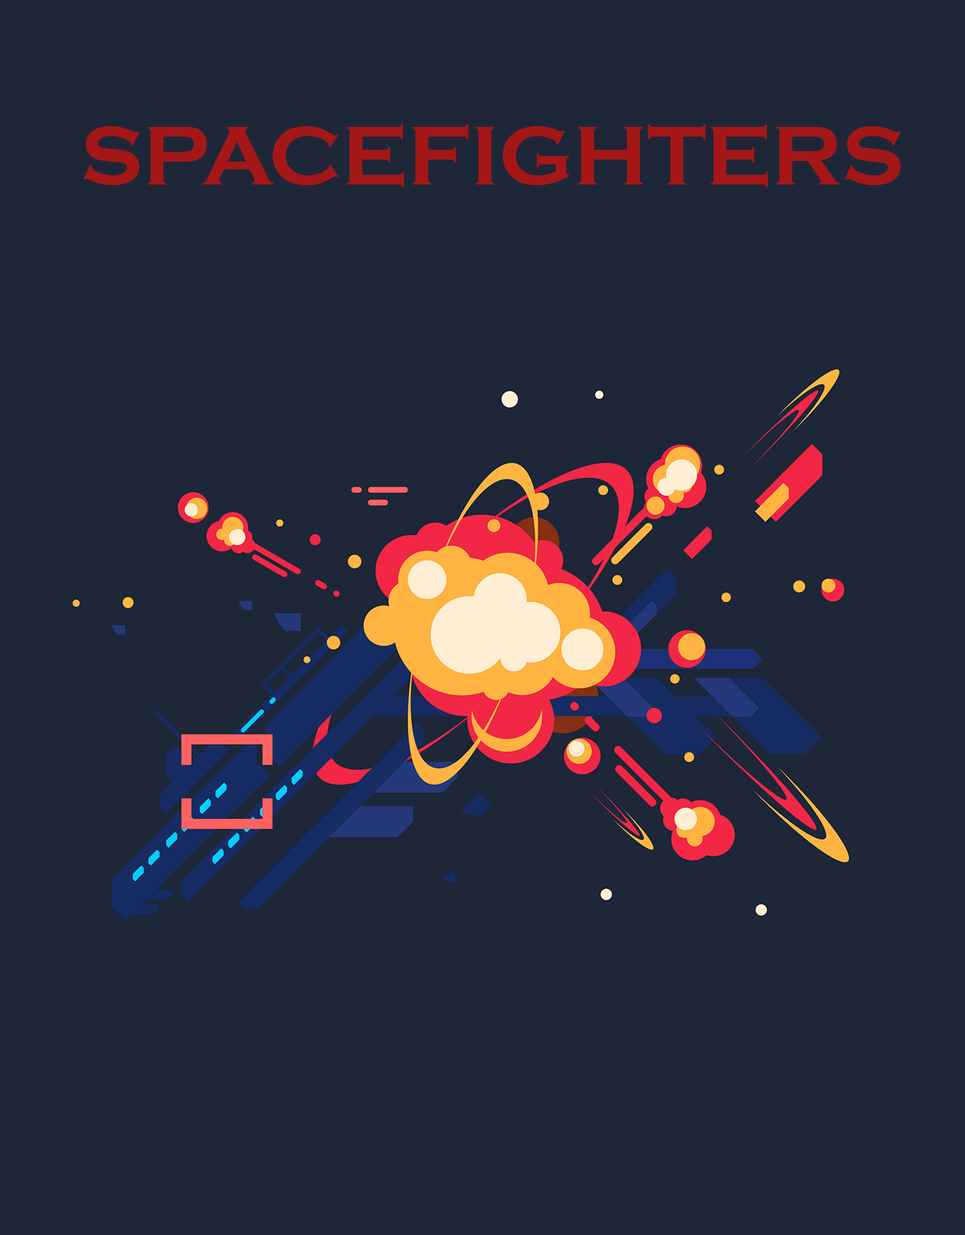
<style>
.page{position:relative;width:965px;height:1235px;background:#1e2738}
.page>*{position:absolute;margin:0}
.t1{font:86.7px "CopperplateGothic-Bold";color:#a51717}
</style>
<div class="page">
<p class="t1" style="left:83px;top:124px;width:819px;height:63px">SPACEFIGHTERS</p>
</div>
